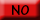
<style>
.page{position:relative;width:40px;height:20px;background:#d91010}
.page>*{position:absolute;margin:0}
.t1{font:15px "TektonPro-Bold";color:#000000}
</style>
<div class="page">
<p class="t1" style="left:11px;top:5px;width:18px;height:10px">NO</p>
</div>
